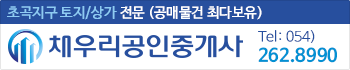
<style>
.page{position:relative;width:350px;height:70px;background:#ffffff}
.page>*{position:absolute;margin:0}
.t1{font:14px "NanumBarunGothicOTF";color:#ffffff}
.t2{font:14px "NanumBarunGothicOTF";color:#8ecbf3}
.t3{font:14px/16px "NanumBarunGothicOTFLight";letter-spacing:0.01em;color:#274f9e}
.t4{font:18px/16px "NanumBarunGothicOTFBold";letter-spacing:0.01em;color:#0391d3}
</style>
<div class="page">
<p class="t1" style="left:7px;top:6px;width:255px;height:14px"><span class="t2">초곡지구 토지/상가 </span>전문 (공매물건 최다보유)</p>
<p class="t3" style="left:258px;top:30px;width:79px;height:33px">Tel: 054)<br><span class="t4">262.8990</span></p>
</div>
